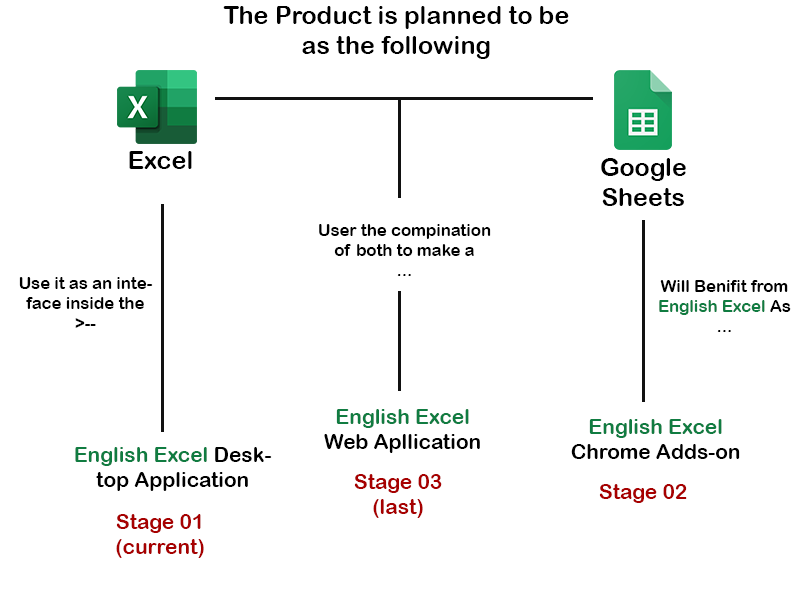
<style>
.page{position:relative;width:800px;height:600px;background:#ffffff}
.page>*{position:absolute;margin:0}
.t1{font:25px "ArialRoundedMTBold";color:#000000}
.t2{font:16.7px "ArialRoundedMTBold";color:#000000}
.t3{font:16.7px "ArialRoundedMTBold";color:#107c41}
.t4{font:20.9px "ArialRoundedMTBold";color:#000000}
.t5{font:20.9px "ArialRoundedMTBold";color:#107c41}
.t6{font:20.9px "ArialRoundedMTBold";color:#a70000}
</style>
<div class="page">
<p class="t1" style="left:223px;top:6px;width:346px;height:53px;text-align:center">The Product is planned to be<br>as the following</p>
<p class="t1" style="left:129px;top:151px;width:63px;height:18px">Excel</p>
<p class="t1" style="left:601px;top:158px;width:85px;height:48px;text-align:center">Google Sheets</p>
<p class="t2" style="left:319px;top:224px;width:172px;height:52px;text-align:center">User the compination of both to make a <br>...</p>
<p class="t2" style="left:19px;top:277px;width:134px;height:51px;text-align:center">Use it as an inteface inside the <br>--&lt;</p>
<p class="t2" style="left:659px;top:280px;width:132px;height:52px;text-align:center">Will Benifit from <br><span class="t3">English Excel </span>As<br>...</p>
<p class="t4" style="left:324px;top:409px;width:156px;height:44px;text-align:center"><span class="t5">English Excel </span><br>Web Apllication</p>
<p class="t4" style="left:571px;top:419px;width:169px;height:40px;text-align:center"><span class="t5">English Excel </span>Chrome Adds-on</p>
<p class="t4" style="left:75px;top:447px;width:197px;height:44px;text-align:center"><span class="t5">English Excel </span>Desktop Application</p>
<p class="t6" style="left:354px;top:474px;width:88px;height:44px;text-align:center">Stage 03<br>(last)</p>
<p class="t6" style="left:599px;top:484px;width:88px;height:19px">Stage 02</p>
<p class="t6" style="left:116px;top:514px;width:88px;height:44px;text-align:center">Stage 01<br>(current)</p>
</div>
